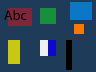
<style>
.page{position:relative;width:96px;height:72px;background:#1e3c5a}
.page>*{position:absolute;margin:0}
.t1{font:14px "MyriadPro-Regular";color:#000000}
</style>
<div class="page">
<p class="t1" style="left:4px;top:10px;width:23px;height:10px">Abc</p>
</div>
